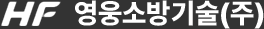
<style>
.page{position:relative;width:264px;height:29px;background:#333333}
.page>*{position:absolute;margin:0}
.t1{font:27.9px "Pretendard-ExtraBold";color:#ffffff}
</style>
<div class="page">
<p class="t1" style="left:75px;top:0px;width:189px;height:29px">영웅소방기술(주)</p>
</div>
